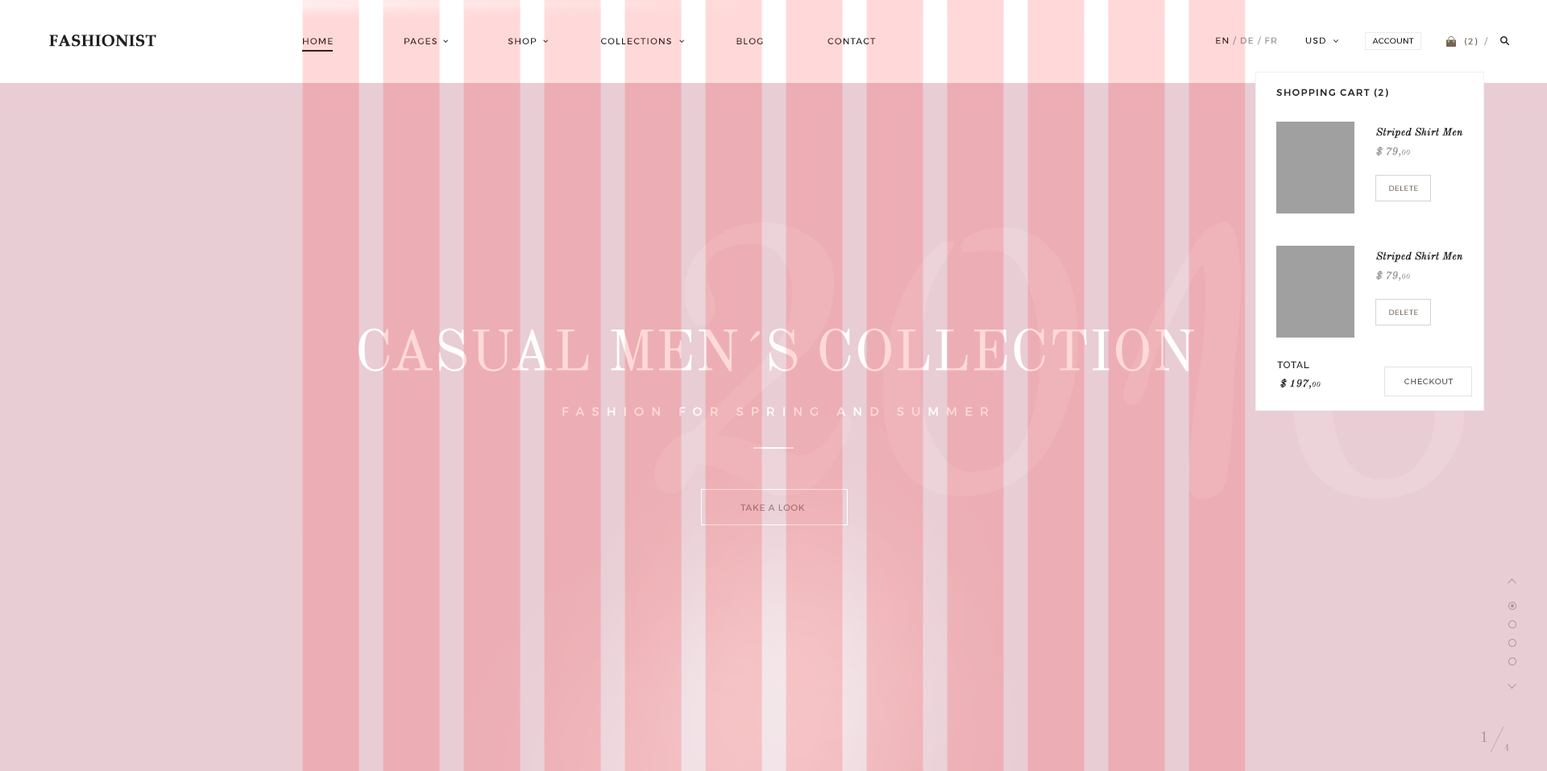
<style>
.page{position:relative;width:1547px;height:771px;background:#e9cdd4}
.page>*{position:absolute;margin:0}
.t1{font:16.1px "BookAntiqua-Bold";color:#202020;text-transform:uppercase;font-weight:bold}
.t2{font:8.9px "Montserrat-Regular";letter-spacing:0.1em}
.t3{font:8.9px "Montserrat-Regular";letter-spacing:0.1em;color:#939393}
.t4{font:8.9px "Montserrat-Regular";letter-spacing:0.1em;color:#202020}
.t5{font:8.1px "Montserrat-Regular";letter-spacing:0.01em;color:#202020}
.t6{font:8.9px "Montserrat-Regular";letter-spacing:0.1em;color:#736550}
.t7{font:9.7px "Montserrat-SemiBold";letter-spacing:0.1em;color:#292929;text-transform:uppercase}
.t8{font:10.5px "OldStandardTT-Italic";color:#202020;font-weight:bold}
.t9{font:10.5px "OldStandardTT-Italic";color:#999999;font-weight:bold}
.t10{font:7.3px "OldStandardTT-Italic";color:#999999;font-weight:bold}
.t11{font:7.3px "Montserrat-Regular";letter-spacing:0.05em;color:#736550;text-transform:uppercase}
.t12{font:57.2px "OldStandardTT-Regular"}
.t13{font:9.7px "Raleway-SemiBold";letter-spacing:0.05em;color:#272727;text-transform:uppercase}
.t14{font:7.3px "OldStandardTT-Italic";color:#202020;font-weight:bold}
.t15{font:8.1px "Montserrat-Regular";letter-spacing:0.05em;color:#5f5f5f}
.t16{font:12.1px "Montserrat-Regular";letter-spacing:0.6em}
.t17{font:8.9px "Montserrat-Regular";letter-spacing:0.05em;color:#9d8188}
.t18{font:16.1px "OldStandardTT-Regular";letter-spacing:0.05em;color:#b2959c}
.t19{font:10.5px "OldStandardTT-Regular";letter-spacing:0.05em;color:#b2959c}
</style>
<div class="page">
<p class="t1" style="left:49px;top:35px;width:107px;height:12px">Fashionist</p>
<p class="t2" style="left:303px;top:38px;width:573px;height:6px">HOME                      PAGES                      SHOP                    COLLECTIONS                    BLOG                    CONTACT</p>
<p class="t3" style="left:1216px;top:36px;width:61px;height:9px"><span class="t4">EN </span>/ DE / FR</p>
<p class="t4" style="left:1305px;top:37px;width:20px;height:7px">USD</p>
<p class="t5" style="left:1372px;top:38px;width:42px;height:6px">ACCOUNT</p>
<p class="t6" style="left:1465px;top:37px;width:23px;height:9px">(2)  <span class="t3">/</span></p>
<p class="t7" style="left:1276px;top:89px;width:112px;height:8px">SHOPPING CART (2)</p>
<p class="t8" style="left:1376px;top:127px;width:86px;height:12px">Striped Shirt Men</p>
<p class="t9" style="left:1376px;top:147px;width:34px;height:10px">$ 79,<span class="t10">00</span></p>
<p class="t11" style="left:1389px;top:185px;width:29px;height:6px">delete</p>
<p class="t8" style="left:1376px;top:251px;width:86px;height:12px">Striped Shirt Men</p>
<p class="t9" style="left:1376px;top:271px;width:34px;height:10px">$ 79,<span class="t10">00</span></p>
<p class="t11" style="left:1389px;top:309px;width:29px;height:6px">delete</p>
<p class="t12" style="left:358px;top:328px;width:836px;height:43px">CASUAL MEN´S COLLECTION</p>
<p class="t13" style="left:1277px;top:361px;width:32px;height:7px">TOTAL</p>
<p class="t8" style="left:1280px;top:379px;width:40px;height:10px">$ 197,<span class="t14">00</span></p>
<p class="t15" style="left:1404px;top:379px;width:49px;height:5px">CHECKOUT</p>
<p class="t16" style="left:562px;top:407px;width:426px;height:9px">FASHION FOR SPRING AND SUMMER</p>
<p class="t17" style="left:740px;top:504px;width:65px;height:7px">TAKE A LOOK</p>
<p class="t18" style="left:1481px;top:731px;width:6px;height:11px">1</p>
<p class="t19" style="left:1504px;top:744px;width:5px;height:7px">4</p>
</div>
